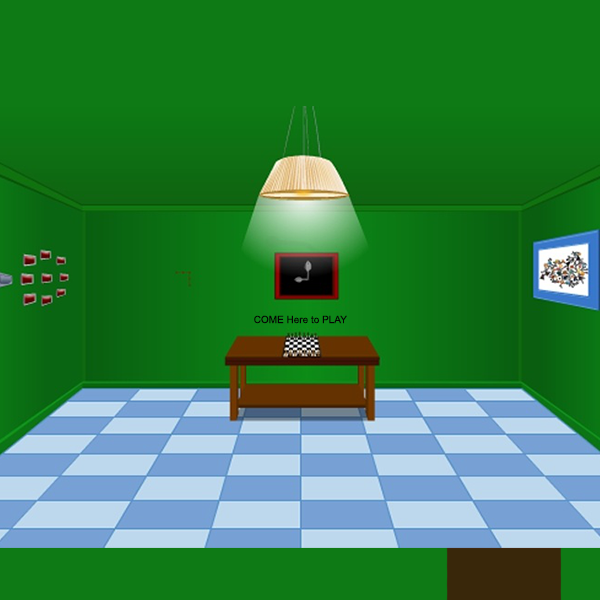
<style>
.page{position:relative;width:600px;height:600px;background:#0e7a15}
.page>*{position:absolute;margin:0}
.t1{font:10px "ArialMT";color:#050505}
</style>
<div class="page">
<p class="t1" style="left:254px;top:315px;width:93px;height:9px">COME Here to PLAY</p>
</div>
